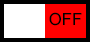
<style>
.page{position:relative;width:90px;height:42px;background:#ffffff}
.page>*{position:absolute;margin:0}
.t1{font:16.7px "ArialMT";color:#000000}
</style>
<div class="page">
<p class="t1" style="left:49px;top:12px;width:33px;height:14px">OFF</p>
</div>
